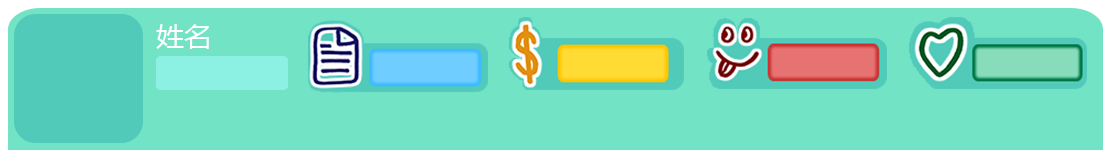
<style>
.page{position:relative;width:1110px;height:150px;background:#73e3c5}
.page>*{position:absolute;margin:0}
.t1{font:28px "MicrosoftYaHeiUI";color:#ffffff}
</style>
<div class="page">
<p class="t1" style="left:156px;top:24px;width:53px;height:25px">姓名</p>
</div>
